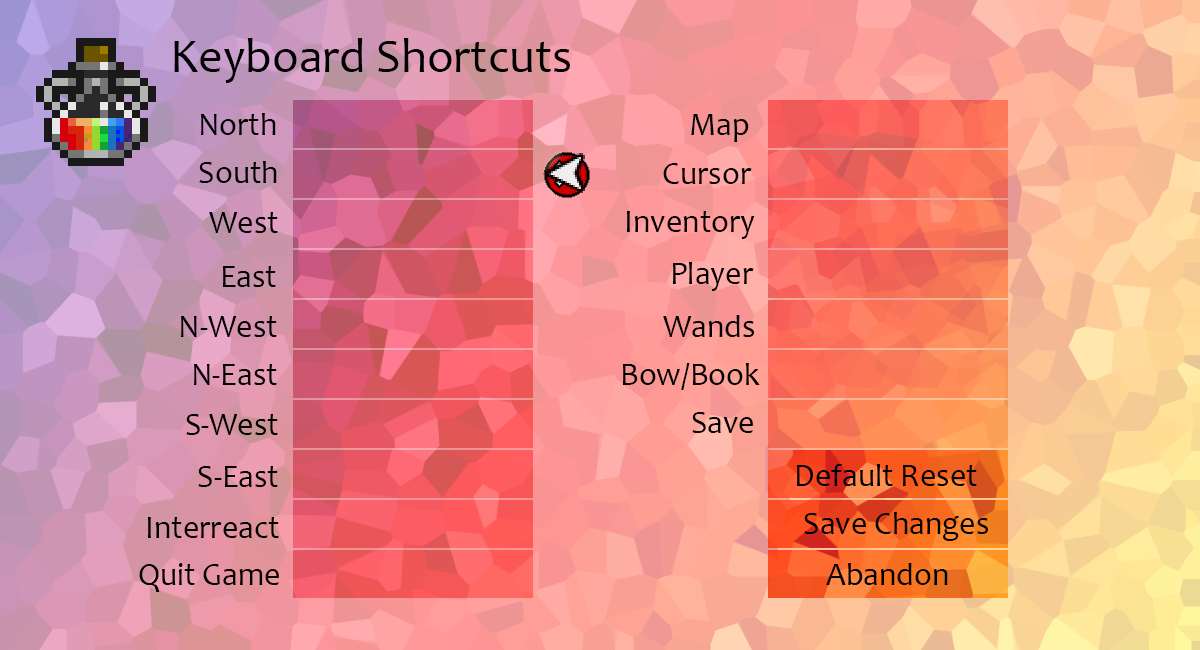
<style>
.page{position:relative;width:1200px;height:650px}
.page>*{position:absolute;margin:0}
.t1{font:48px "Candara";color:#000000}
.t2{font:32px "Candara";color:#000000}
</style>
<div class="page">
<p class="t1" style="left:174px;top:38px;width:396px;height:45px">Keyboard Shortcuts</p>
<p class="t2" style="left:201px;top:113px;width:75px;height:22px">North</p>
<p class="t2" style="left:691px;top:114px;width:58px;height:28px">Map</p>
<p class="t2" style="left:199px;top:161px;width:78px;height:22px">South</p>
<p class="t2" style="left:663px;top:163px;width:89px;height:21px">Cursor</p>
<p class="t2" style="left:209px;top:212px;width:69px;height:21px">West</p>
<p class="t2" style="left:627px;top:211px;width:128px;height:28px">Inventory</p>
<p class="t2" style="left:222px;top:266px;width:54px;height:21px">East</p>
<p class="t2" style="left:673px;top:262px;width:81px;height:29px">Player</p>
<p class="t2" style="left:181px;top:316px;width:96px;height:21px">N-West</p>
<p class="t2" style="left:663px;top:315px;width:91px;height:22px">Wands</p>
<p class="t2" style="left:194px;top:364px;width:83px;height:21px">N-East</p>
<p class="t2" style="left:622px;top:363px;width:138px;height:27px">Bow/Book</p>
<p class="t2" style="left:186px;top:414px;width:92px;height:21px">S-West</p>
<p class="t2" style="left:692px;top:412px;width:61px;height:21px">Save</p>
<p class="t2" style="left:198px;top:466px;width:80px;height:21px">S-East</p>
<p class="t2" style="left:797px;top:464px;width:180px;height:22px">Default Reset</p>
<p class="t2" style="left:148px;top:517px;width:131px;height:21px">Interreact</p>
<p class="t2" style="left:804px;top:512px;width:184px;height:29px">Save Changes</p>
<p class="t2" style="left:139px;top:563px;width:140px;height:29px">Quit Game</p>
<p class="t2" style="left:826px;top:563px;width:122px;height:22px">Abandon</p>
</div>
